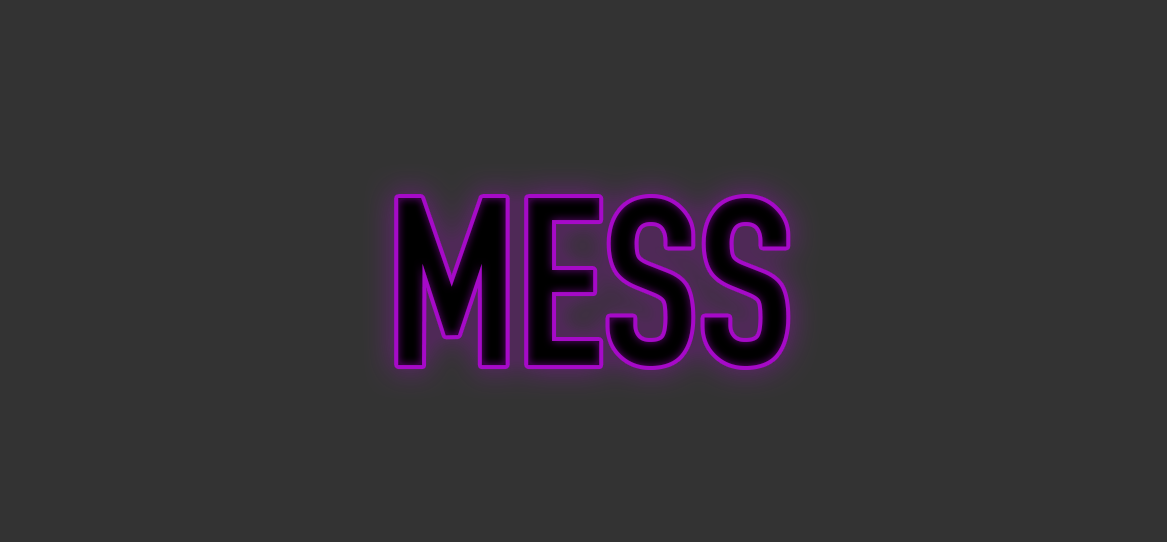
<style>
.page{position:relative;width:1167px;height:542px;background:#333333}
.page>*{position:absolute;margin:0}
.t1{font:233.7px "DINEngschrift";color:#070008}
</style>
<div class="page">
<p class="t1" style="left:398px;top:198px;width:389px;height:168px">MESS</p>
</div>
